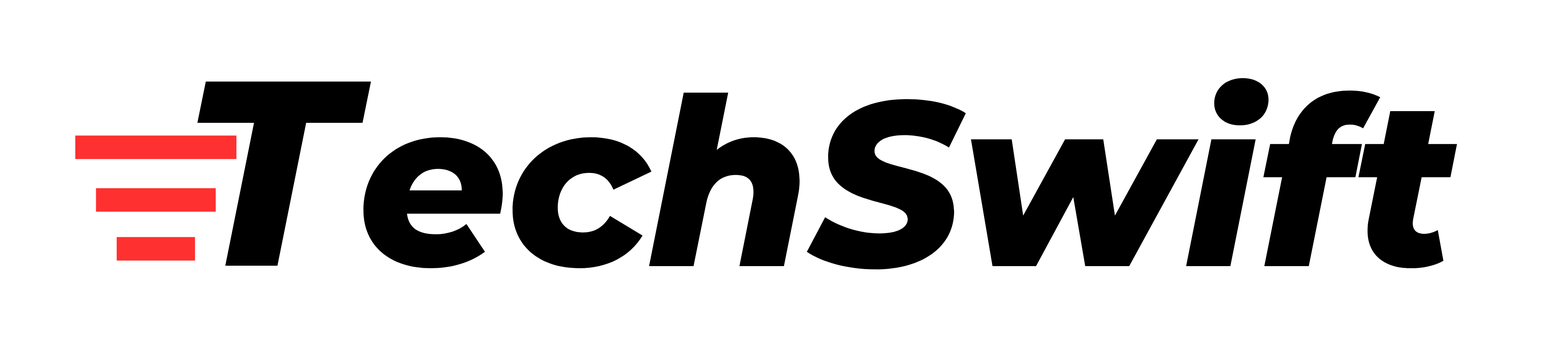
<style>
.page{position:relative;width:1568px;height:348px;background:#ffffff}
.page>*{position:absolute;margin:0}
.t1{font:234.1px "Montserrat-ExtraBoldItalic";color:#000000}
.t2{font:263.4px "Montserrat-ExtraBoldItalic";color:#000000}
</style>
<div class="page">
<p class="t1" style="left:363px;top:78px;width:1094px;height:192px">echSwift</p>
<p class="t2" style="left:197px;top:82px;width:174px;height:184px">T</p>
</div>
